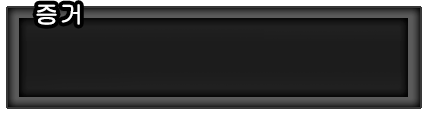
<style>
.page{position:relative;width:427px;height:116px;background:#1c1c1c}
.page>*{position:absolute;margin:0}
.t1{font:24px "Gulim";letter-spacing:0.02em;color:#ffffff;font-weight:bold}
</style>
<div class="page">
<p class="t1" style="left:36px;top:4px;width:44px;height:21px">증거</p>
</div>
